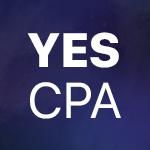
<style>
.page{position:relative;width:150px;height:150px}
.page>*{position:absolute;margin:0}
.t1{font:48px "SFUIDisplay-Heavy";color:#ffffff}
.t2{font:50px "SFUIDisplay-Regular";color:#ffffff}
</style>
<div class="page">
<p class="t1" style="left:27px;top:32px;width:92px;height:36px">YES</p>
<p class="t2" style="left:30px;top:82px;width:91px;height:37px">CPA</p>
</div>
